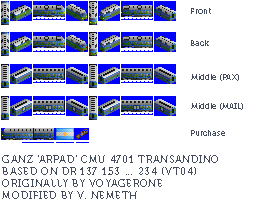
<style>
.page{position:relative;width:256px;height:217px;background:#ffffff}
.page>*{position:absolute;margin:0}
.t1{font:8px "Museo700-Regular";color:#444c5c}
.t2{font:10px "Museo700-Regular";letter-spacing:0.075em;color:#444c5c;text-transform:uppercase}
</style>
<div class="page">
<p class="t1" style="left:191px;top:8px;width:20px;height:6px">Front</p>
<p class="t1" style="left:191px;top:40px;width:18px;height:6px">Back</p>
<p class="t1" style="left:191px;top:74px;width:48px;height:7px">Middle (PAX)</p>
<p class="t1" style="left:191px;top:103px;width:52px;height:7px">Middle (MAIL)</p>
<p class="t1" style="left:191px;top:130px;width:34px;height:6px">Purchase</p>
<p class="t2" style="left:2px;top:155px;width:216px;height:44px">Ganz 'Arpad' CMU 4701 Transandino<br>based on DR 137 153 … 234 (vt04)<br>originally by voyagerone<br>modified by v. nemeth</p>
</div>
